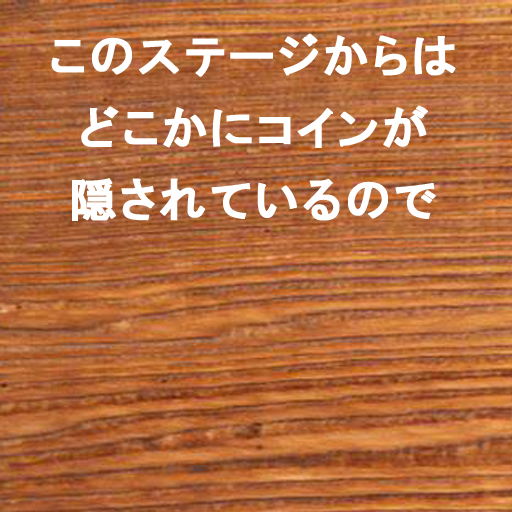
<style>
.page{position:relative;width:512px;height:512px}
.page>*{position:absolute;margin:0}
.t1{font:46px/72px "HGPGothicE";letter-spacing:0.05em;color:#ffffff;font-weight:bold}
</style>
<div class="page">
<p class="t1" style="left:51px;top:33px;width:405px;height:188px;text-align:center">このステージからは<br>どこかにコインが<br>隠されているので</p>
</div>
